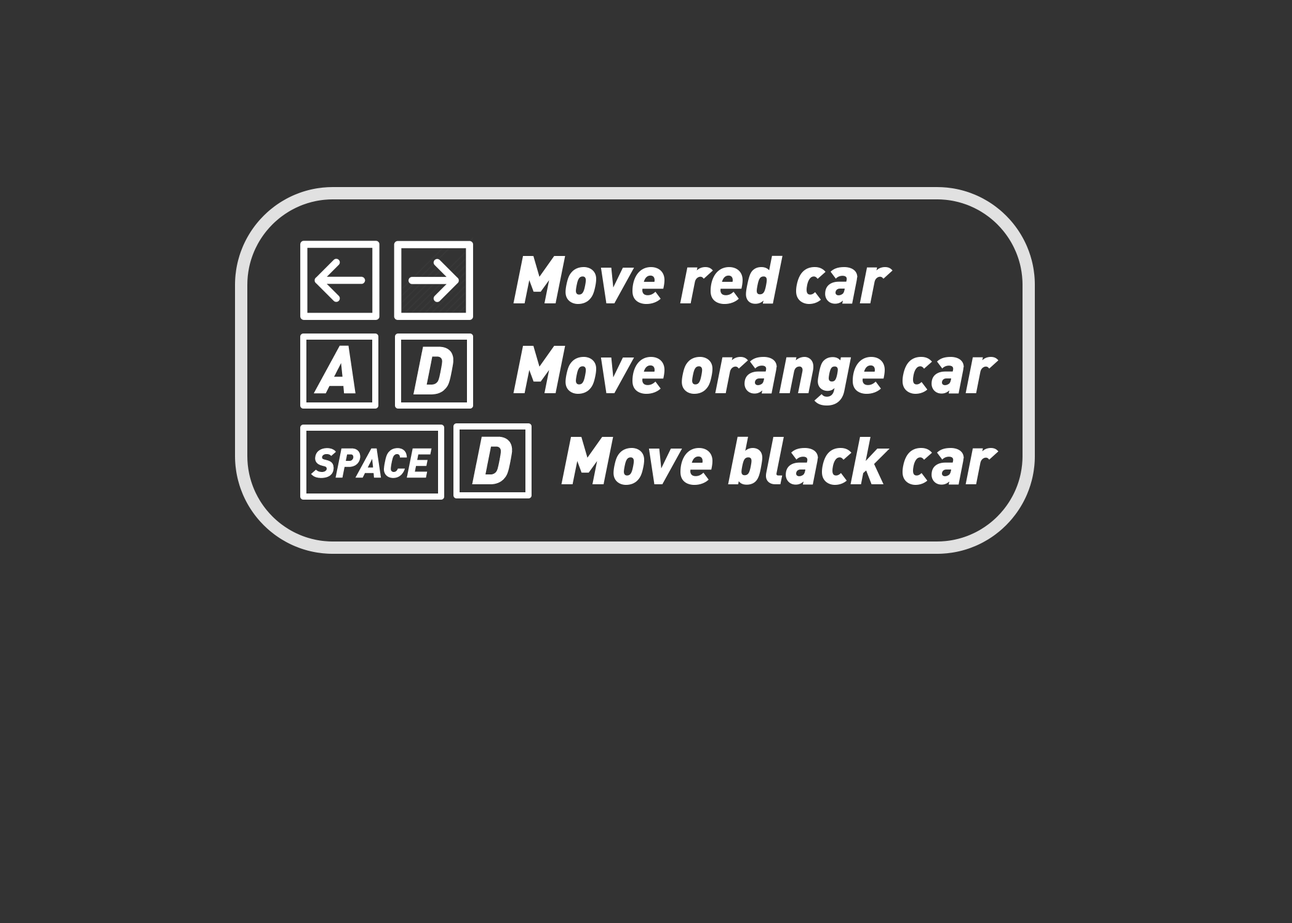
<style>
.page{position:relative;width:1292px;height:923px;background:#333333}
.page>*{position:absolute;margin:0}
.t1{font:66.7px "DINPro-BlackItalic";color:#ffffff}
.t2{font:41px "DINPro-BlackItalic";color:#ffffff}
</style>
<div class="page">
<p class="t1" style="left:513px;top:255px;width:380px;height:49px">Move red car</p>
<p class="t1" style="left:314px;top:345px;width:42px;height:49px">A</p>
<p class="t1" style="left:413px;top:346px;width:40px;height:48px">D</p>
<p class="t1" style="left:513px;top:346px;width:486px;height:59px">Move orange car</p>
<p class="t1" style="left:472px;top:436px;width:41px;height:48px">D</p>
<p class="t1" style="left:561px;top:436px;width:438px;height:49px">Move black car</p>
<p class="t2" style="left:311px;top:448px;width:121px;height:30px">SPACE</p>
</div>
